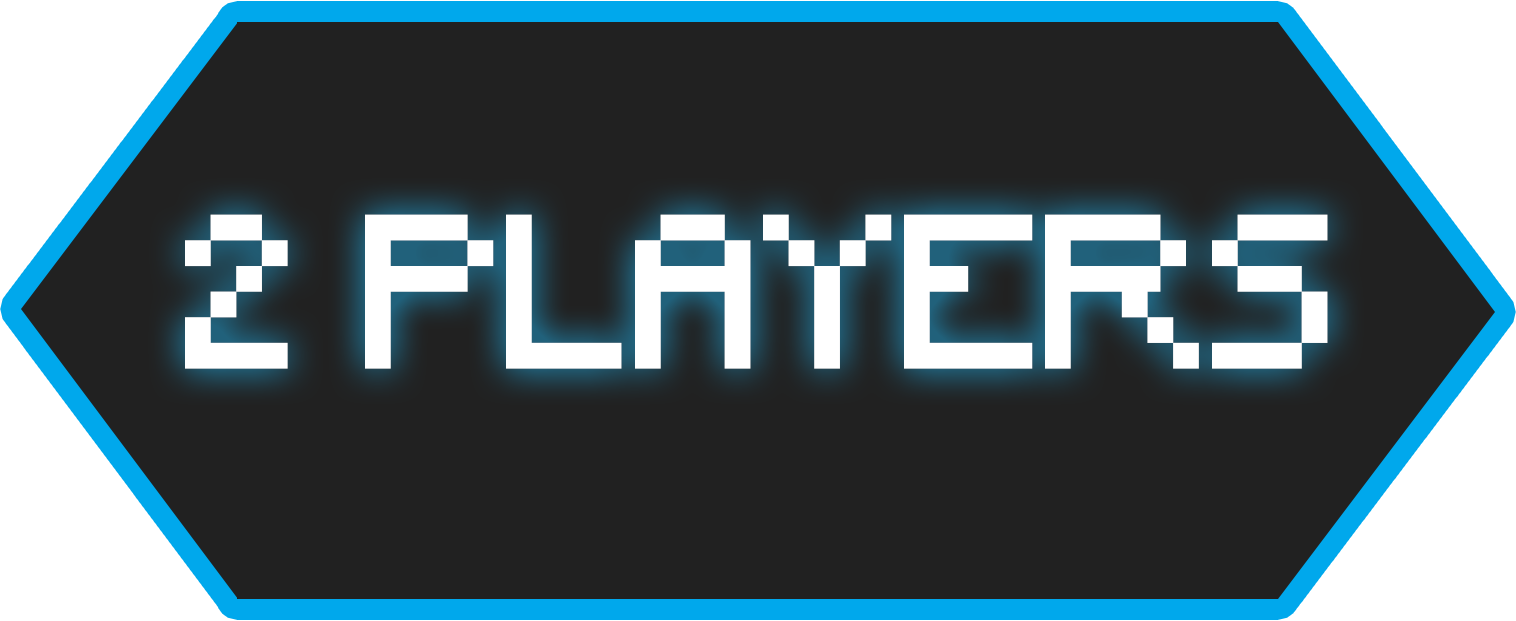
<style>
.page{position:relative;width:1516px;height:621px;background:#212121}
.page>*{position:absolute;margin:0}
.t1{font:205.3px "Minecraft";color:#ffffff}
</style>
<div class="page">
<p class="t1" style="left:185px;top:214px;width:1143px;height:155px">2 PLAYERS</p>
</div>
